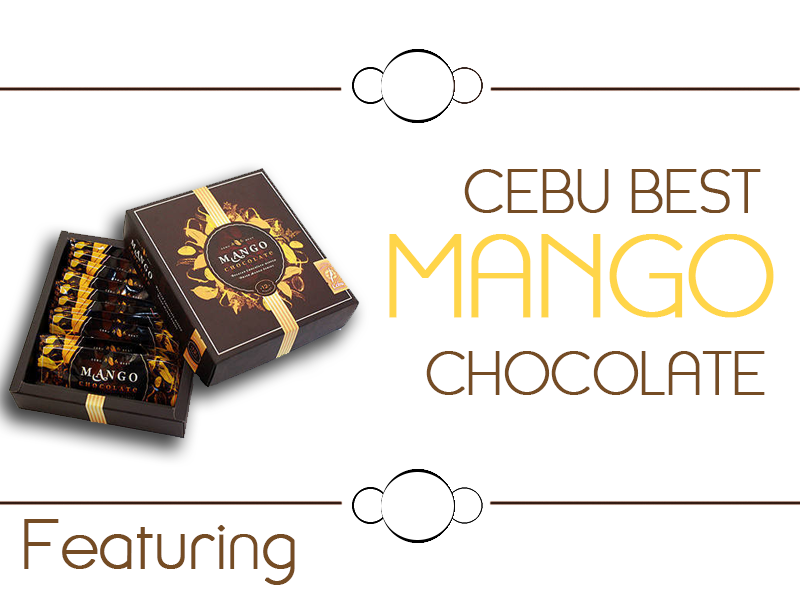
<style>
.page{position:relative;width:800px;height:600px;background:#ffffff}
.page>*{position:absolute;margin:0}
.t1{font:52px "Kraken-Thin";color:#754c24;text-transform:uppercase;font-weight:bold}
.t2{font:52px "Kraken-Thin";color:#331b13;text-transform:uppercase;font-weight:bold}
.t3{font:100px "Kraken-Thin";color:#ffd549;text-transform:uppercase;font-weight:bold}
.t4{font:60px "Kraken-Thin";color:#754c24;font-weight:bold}
</style>
<div class="page">
<p class="t1" style="left:389px;top:169px;width:385px;height:226px;text-align:center"><span class="t2">                   </span>cebu best<br>        <span class="t3">mango<br>           </span>chocolate</p>
<p class="t4" style="left:24px;top:519px;width:271px;height:66px">Featuring</p>
</div>
